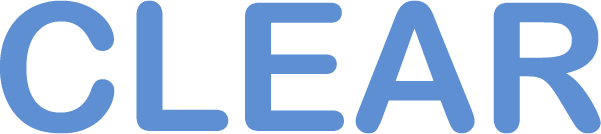
<style>
.page{position:relative;width:601px;height:134px;background:#ffffff}
.page>*{position:absolute;margin:0}
.t1{font:179px "ArialRoundedMTBold";color:#5e8fd3}
</style>
<div class="page">
<p class="t1" style="left:0px;top:0px;width:601px;height:134px">CLEAR</p>
</div>
